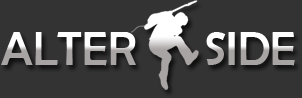
<style>
.page{position:relative;width:302px;height:98px;background:#333333}
.page>*{position:absolute;margin:0}
.t1{font:48px "BerlinSansFB-Reg"}
</style>
<div class="page">
<p class="t1" style="left:1px;top:32px;width:135px;height:34px">ALTER</p>
<p class="t1" style="left:206px;top:32px;width:89px;height:34px">SIDE</p>
</div>
